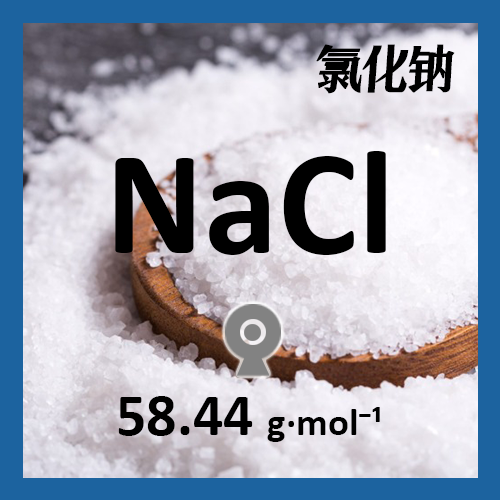
<style>
.page{position:relative;width:500px;height:500px}
.page>*{position:absolute;margin:0}
.t1{font:48px "ZoomlaShuaisongA028";color:#000000;font-weight:bold;scale:0.93 1}
.t2{font:150px "Calibri-Bold";color:#000000}
.t3{font:39px "Calibri-Bold";color:#000000}
.t4{font:60px "Calibri-Bold";color:#000000}
</style>
<div class="page">
<p class="t1" style="left:316px;top:44px;width:139px;height:50px">氯化钠</p>
<p class="t2" style="left:115px;top:151px;width:271px;height:104px">NaCl</p>
<p class="t3" style="left:118px;top:396px;width:262px;height:46px"><span class="t4">58.44 </span>g·mol⁻¹</p>
</div>
